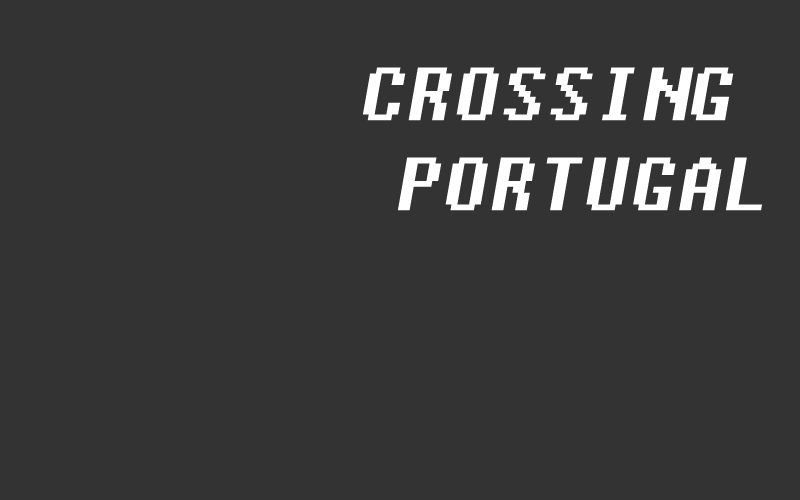
<style>
.page{position:relative;width:800px;height:500px;background:#333333}
.page>*{position:absolute;margin:0}
.t1{font:75px "Fixedsys";color:#ffffff;font-style:italic}
</style>
<div class="page">
<p class="t1" style="left:363px;top:67px;width:399px;height:144px">CROSSING <br> PORTUGAL</p>
</div>
